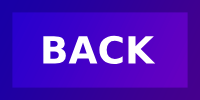
<style>
.page{position:relative;width:200px;height:100px}
.page>*{position:absolute;margin:0}
.t1{font:37.5px "DejaVuSans-Bold";color:#ffffff}
</style>
<div class="page">
<p class="t1" style="left:43px;top:35px;width:113px;height:30px">BACK</p>
</div>
